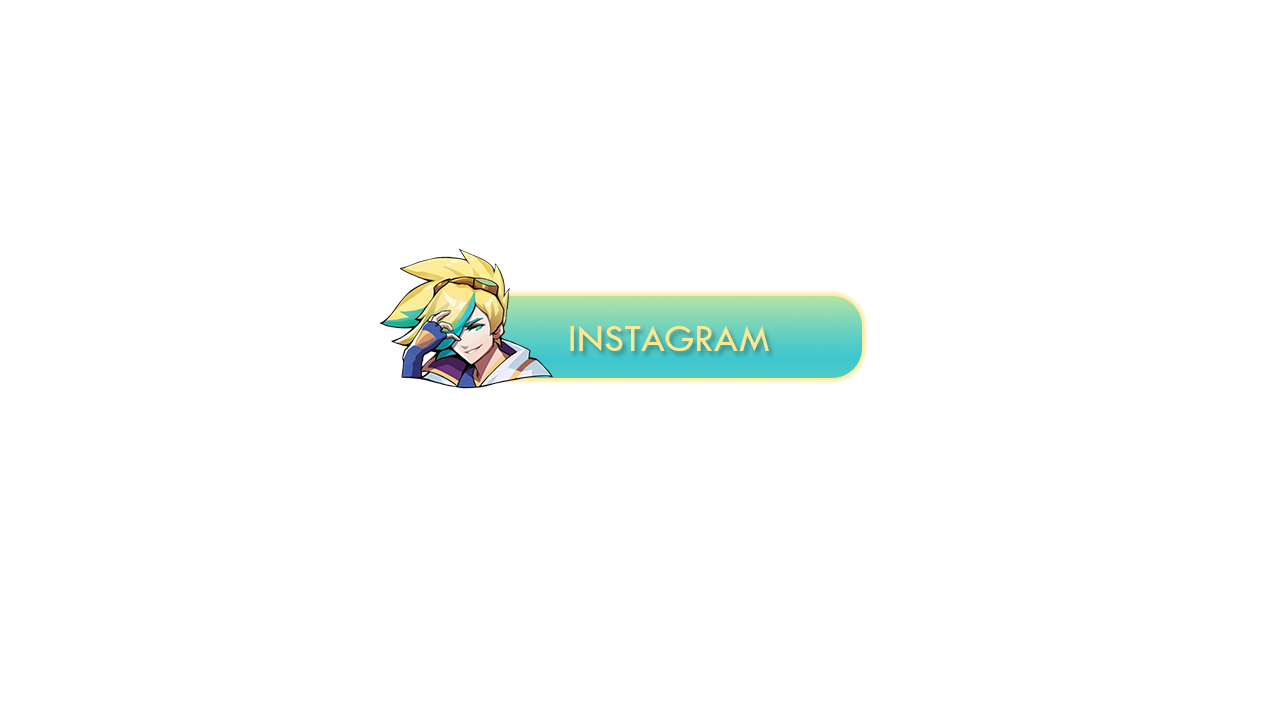
<style>
.page{position:relative;width:1280px;height:720px;background:#ffffff}
.page>*{position:absolute;margin:0}
.t1{font:40px "TwCenMT-Regular";color:#fde88f}
</style>
<div class="page">
<p class="t1" style="left:570px;top:326px;width:199px;height:25px">INSTAGRAM</p>
</div>
